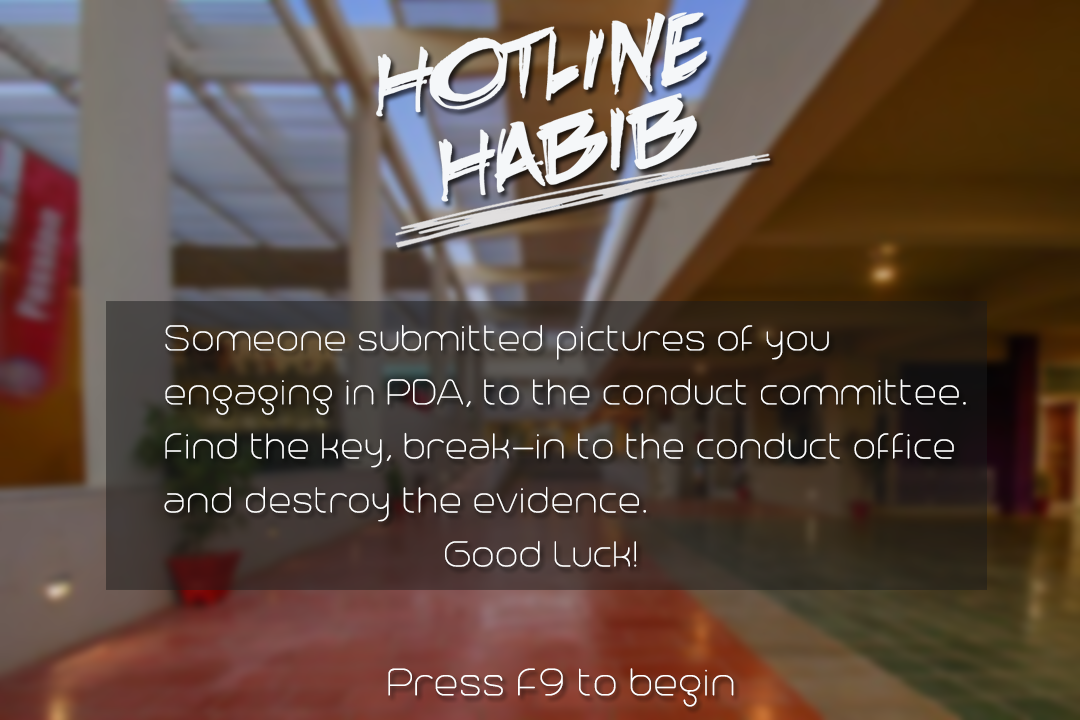
<style>
.page{position:relative;width:1080px;height:720px}
.page>*{position:absolute;margin:0}
.t1{font:45px "Trench-Thin";color:#ffffff}
.t2{font:48px "Trench-Thin";color:#ffffff}
</style>
<div class="page">
<p class="t1" style="left:164px;top:324px;width:802px;height:243px">Someone submitted pictures of you<br>engaging in PDA, to the conduct committee.<br>Find the key, break-in to the conduct office<br>and destroy the evidence.<br>                            Good Luck!</p>
<p class="t2" style="left:388px;top:668px;width:346px;height:39px">Press F9 to begin</p>
</div>
